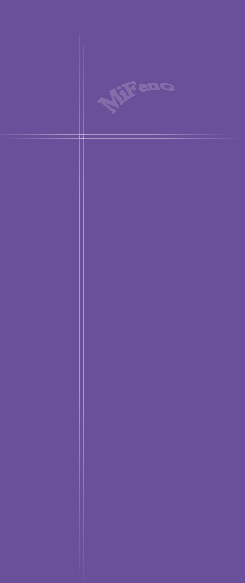
<style>
.page{position:relative;width:245px;height:583px;background:#6a509b}
.page>*{position:absolute;margin:0}
.t1{font:18px "Sylfaen";color:#826da9}
</style>
<div class="page">
<p class="t1" style="left:97px;top:81px;width:78px;height:33px;rotate:-16deg">MiFenG</p>
</div>
